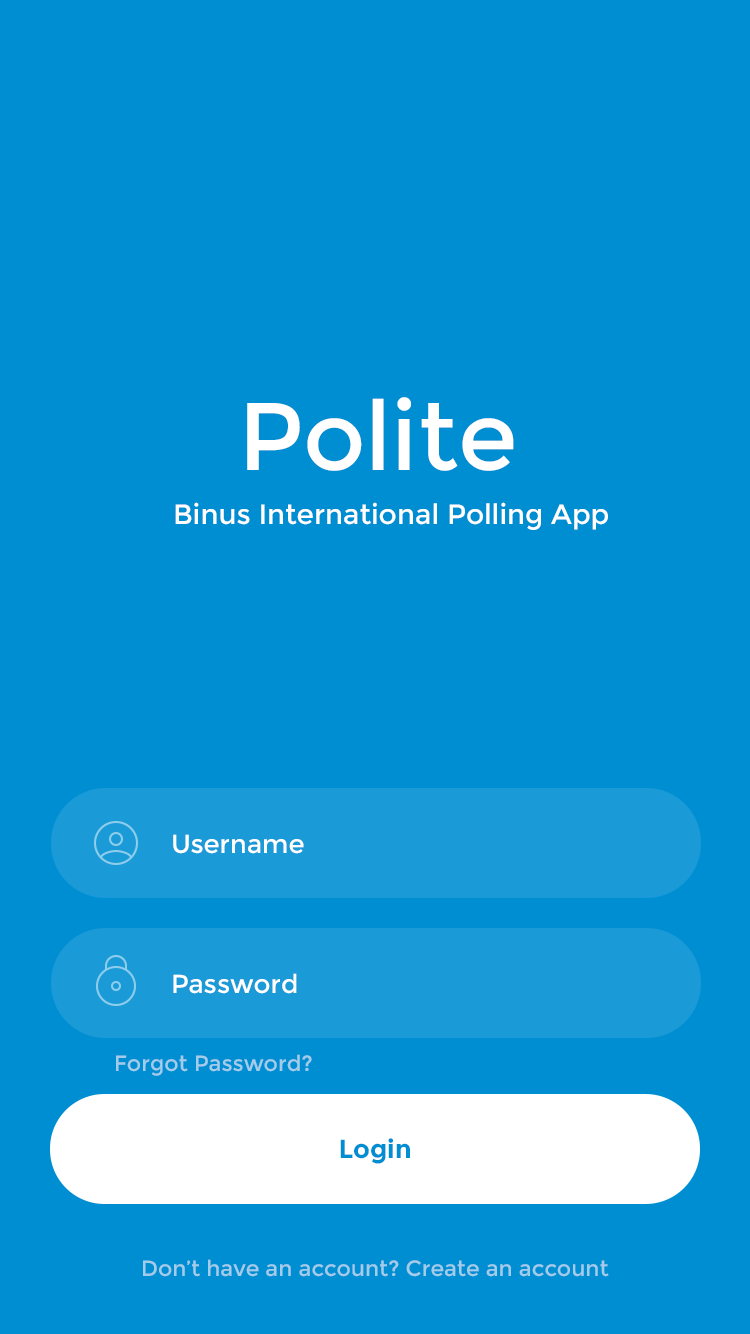
<style>
.page{position:relative;width:750px;height:1334px;background:#008ed3}
.page>*{position:absolute;margin:0}
.t1{font:96px "Montserrat-Regular";color:#ffffff}
.t2{font:28px "Montserrat-Regular";color:#ffffff}
.t3{font:26px "Montserrat-Regular";color:#ffffff}
.t4{font:22px "Montserrat-Regular";color:#a3ccea}
.t5{font:26px "Montserrat-Bold";color:#008ed3}
</style>
<div class="page">
<p class="t1" style="left:247px;top:397px;width:267px;height:74px">Polite</p>
<p class="t2" style="left:175px;top:502px;width:433px;height:28px">Binus International Polling App</p>
<p class="t3" style="left:173px;top:834px;width:131px;height:20px">Username</p>
<p class="t3" style="left:173px;top:973px;width:124px;height:21px">Password</p>
<p class="t4" style="left:116px;top:1054px;width:196px;height:22px">Forgot Password?</p>
<p class="t5" style="left:340px;top:1138px;width:70px;height:26px">Login</p>
<p class="t4" style="left:143px;top:1259px;width:466px;height:18px">Don’t have an account? Create an account</p>
</div>
